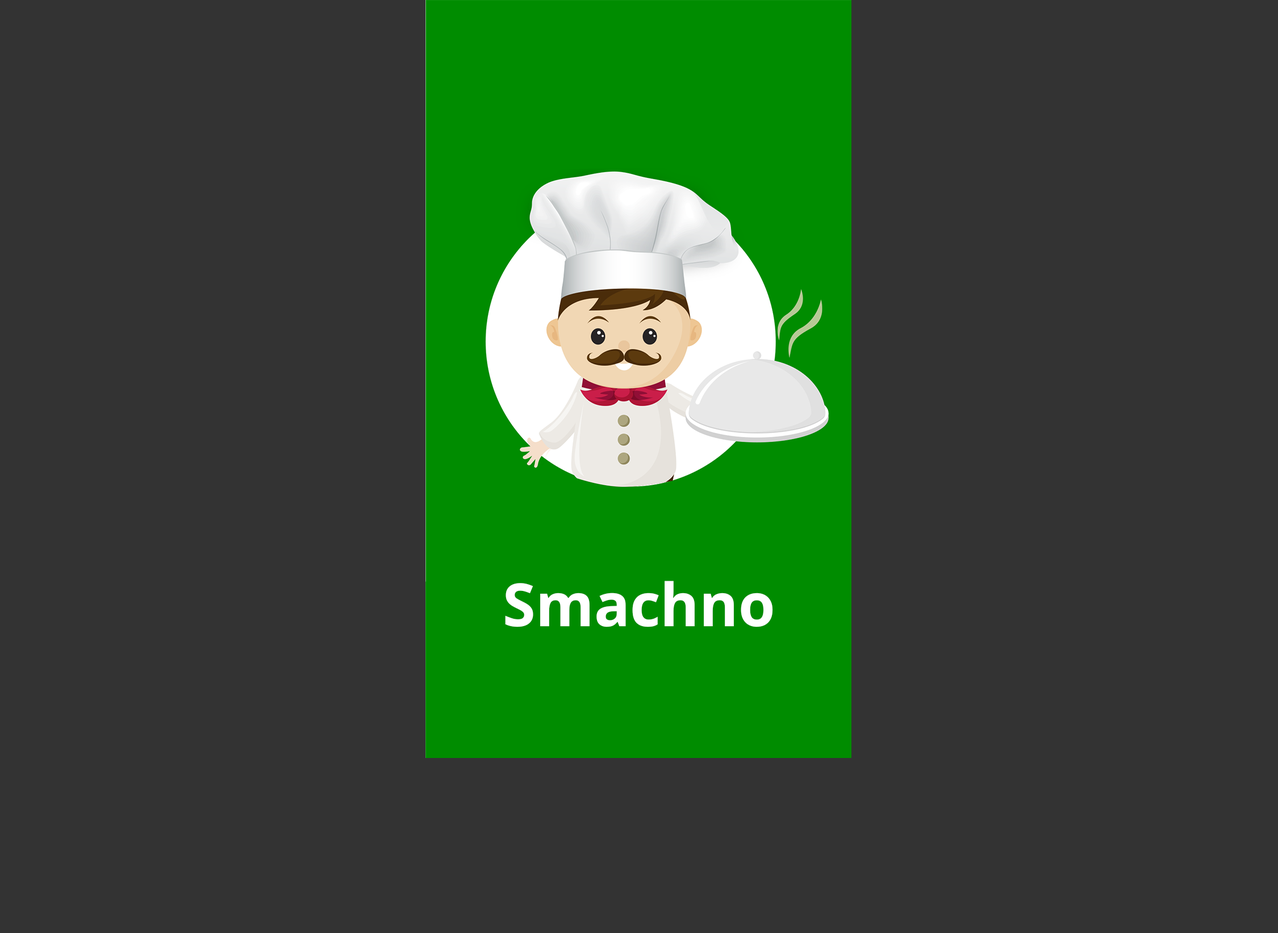
<style>
.page{position:relative;width:1278px;height:933px;background:#333333}
.page>*{position:absolute;margin:0}
.t1{font:59.4px "NotoSans-Bold";color:#ffffff}
</style>
<div class="page">
<p class="t1" style="left:505px;top:581px;width:268px;height:46px">Smachno</p>
</div>
